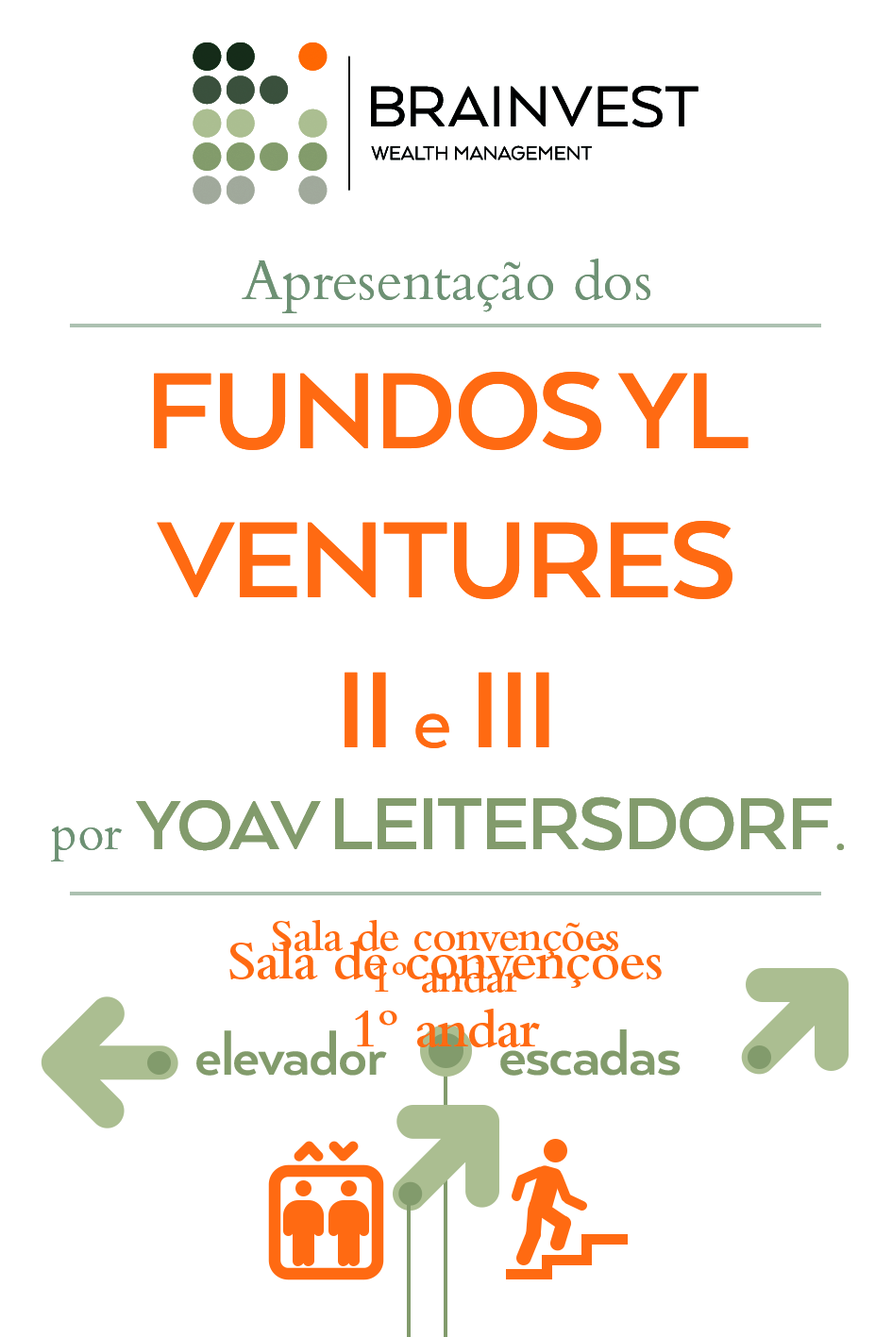
<style>
.page{position:relative;width:892px;height:1337px;background:#ffffff}
.page>*{position:absolute;margin:0}
.t1{font:124.5px "ArquitectaBold";letter-spacing:-0.025em;color:#ff6a12;text-transform:uppercase}
.t2{font:60px/75px "BemboStd";color:#6d9173}
.t3{font:94.4px "Arquitecta";letter-spacing:-0.025em;color:#ff6a12}
.t4{font:51.9px "BemboStd";color:#6d9173}
.t5{font:80.2px "ArquitectaBold";letter-spacing:-0.025em;color:#839c6c;text-transform:uppercase}
.t6{font:84.9px "ArquitectaBold";letter-spacing:-0.025em;color:#839c6c;text-transform:uppercase}
.t7{font:67.9px "BemboStd";color:#839c6c}
.t8{font:45.3px/41.5px "BemboStd-Semibold";letter-spacing:-0.025em;color:#ff6a12}
.t9{font:56.6px "BemboStd-Semibold";letter-spacing:-0.025em;color:#ff6a12}
.t10{font:66.1px "ArquitectaBold";letter-spacing:-0.025em;color:#829b6b}
</style>
<div class="page">
<p class="t1" style="left:51px;top:259px;width:793px;height:603px;text-align:center"><span class="t2">Apresentação dos<br></span>FundoS YL <br>Ventures <br>II <span class="t3">e</span> III <br><span class="t4">por </span><span class="t5">Yoav </span><span class="t6">leitersdorf</span><span class="t7">.</span></p>
<p class="t1" style="left:51px;top:259px;width:793px;height:603px;text-align:center"><span class="t2">Apresentação dos<br></span>FundoS YL <br>Ventures <br>II <span class="t3">e</span> III <br><span class="t4">por </span><span class="t5">Yoav </span><span class="t6">leitersdorf</span><span class="t7">.</span></p>
<p class="t8" style="left:272px;top:920px;width:346px;height:73px;text-align:center">Sala de convenções<br>1º andar</p>
<p class="t9" style="left:229px;top:941px;width:433px;height:106px;text-align:center">Sala de convenções<br>1º andar</p>
<p class="t10" style="left:196px;top:1030px;width:191px;height:46px">elevador</p>
</div>
